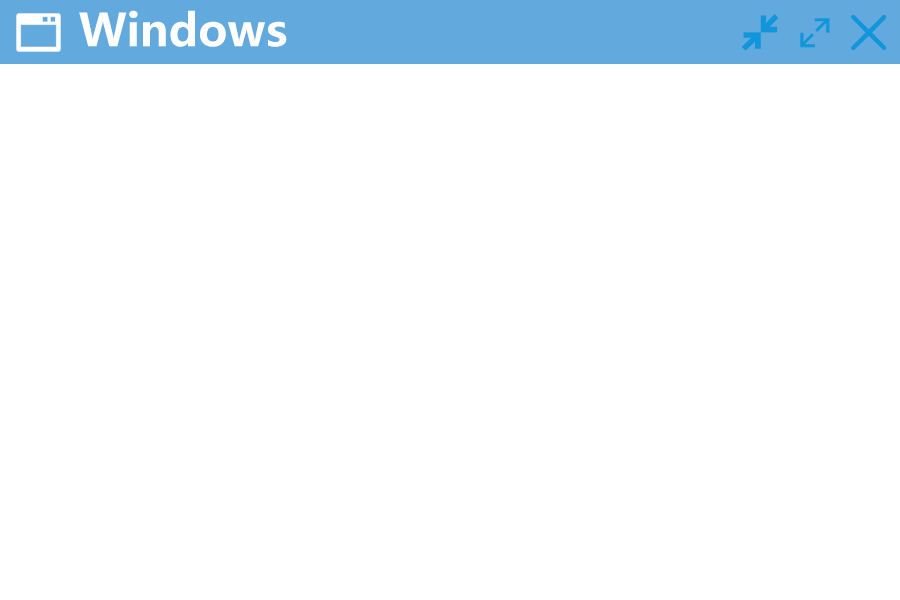
<style>
.page{position:relative;width:900px;height:600px;background:#ffffff}
.page>*{position:absolute;margin:0}
.t1{font:44.6px "MicrosoftYaHei-Bold";color:#ffffff}
</style>
<div class="page">
<p class="t1" style="left:79px;top:10px;width:208px;height:37px">Windows</p>
</div>
